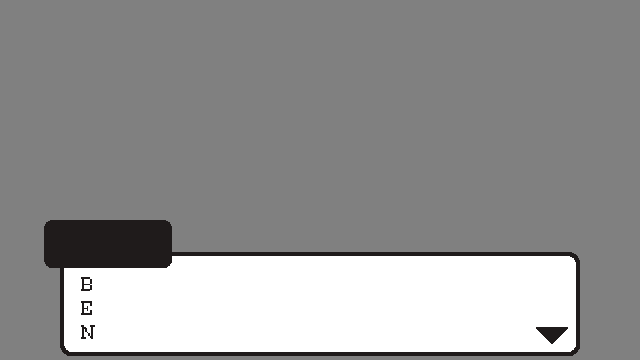
<style>
.page{position:relative;width:640px;height:360px;background:#808080}
.page>*{position:absolute;margin:0}
.t1{font:18px/24px "Millennium-Regular";letter-spacing:1.16em;color:#1f1b1b}
</style>
<div class="page">
<p class="t1" style="left:81px;top:277px;width:14px;height:62px">B<br>E<br>N</p>
</div>
